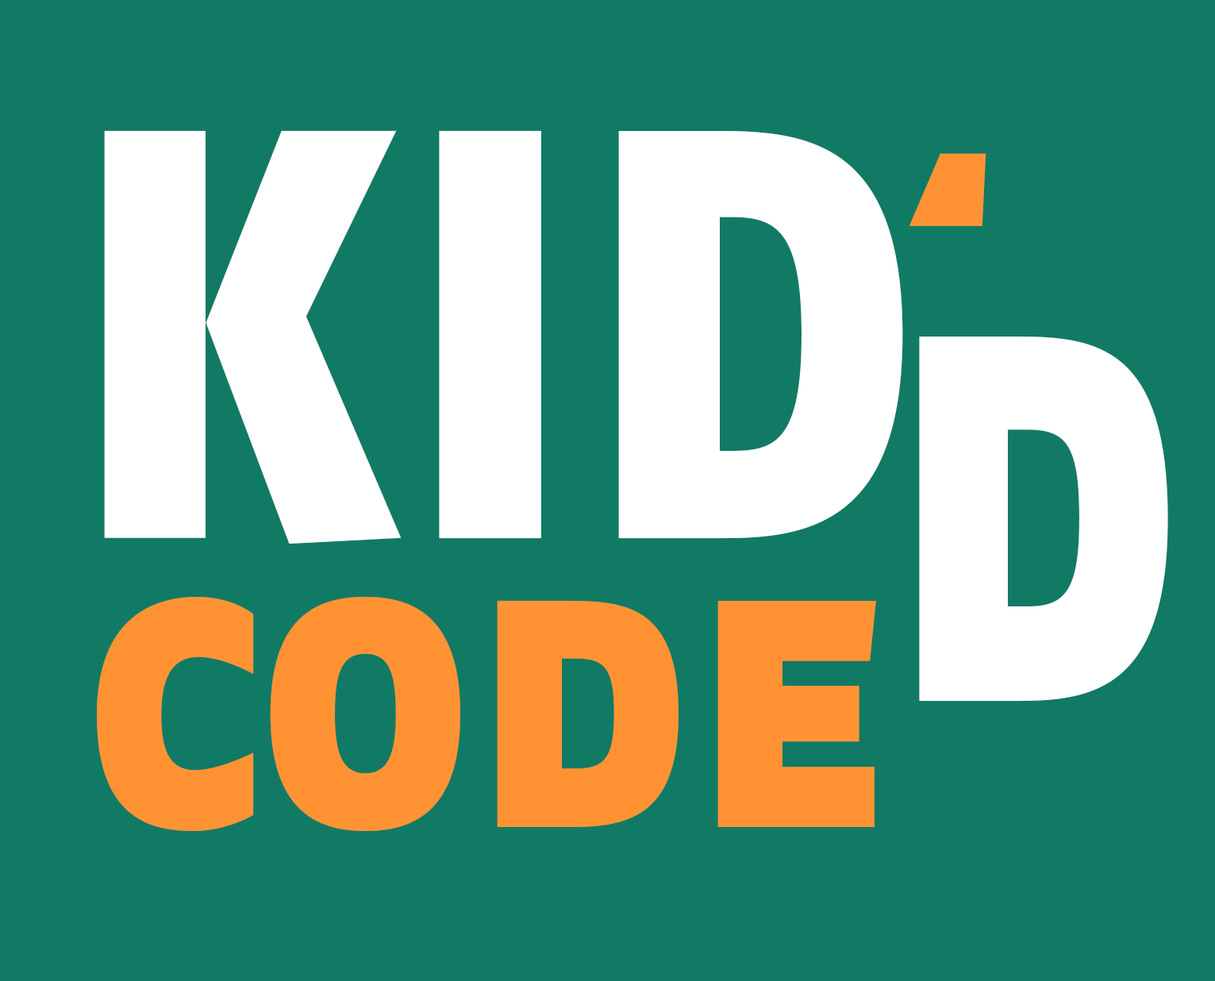
<style>
.page{position:relative;width:1215px;height:981px;background:#117a65}
.page>*{position:absolute;margin:0}
.t1{font:581.9px "FagoEx-BlackCaps";color:#ffffff;scale:0.83 1}
.t2{font:209.5px "FagoEx-BlackCaps";color:#ff9333;scale:1.53 1}
.t3{font:651.2px "FagoEx-BlackCaps";color:#ffffff;scale:0.65 1}
.t4{font:403.5px "FagoEx-BlackCaps";color:#ff9333;scale:0.76 1}
</style>
<div class="page">
<p class="t1" style="left:104px;top:130px;width:799px;height:415px">KID</p>
<p class="t2" style="left:909px;top:153px;width:78px;height:73px">‘</p>
<p class="t3" style="left:919px;top:337px;width:249px;height:365px">d</p>
<p class="t4" style="left:97px;top:596px;width:779px;height:235px">code</p>
</div>
